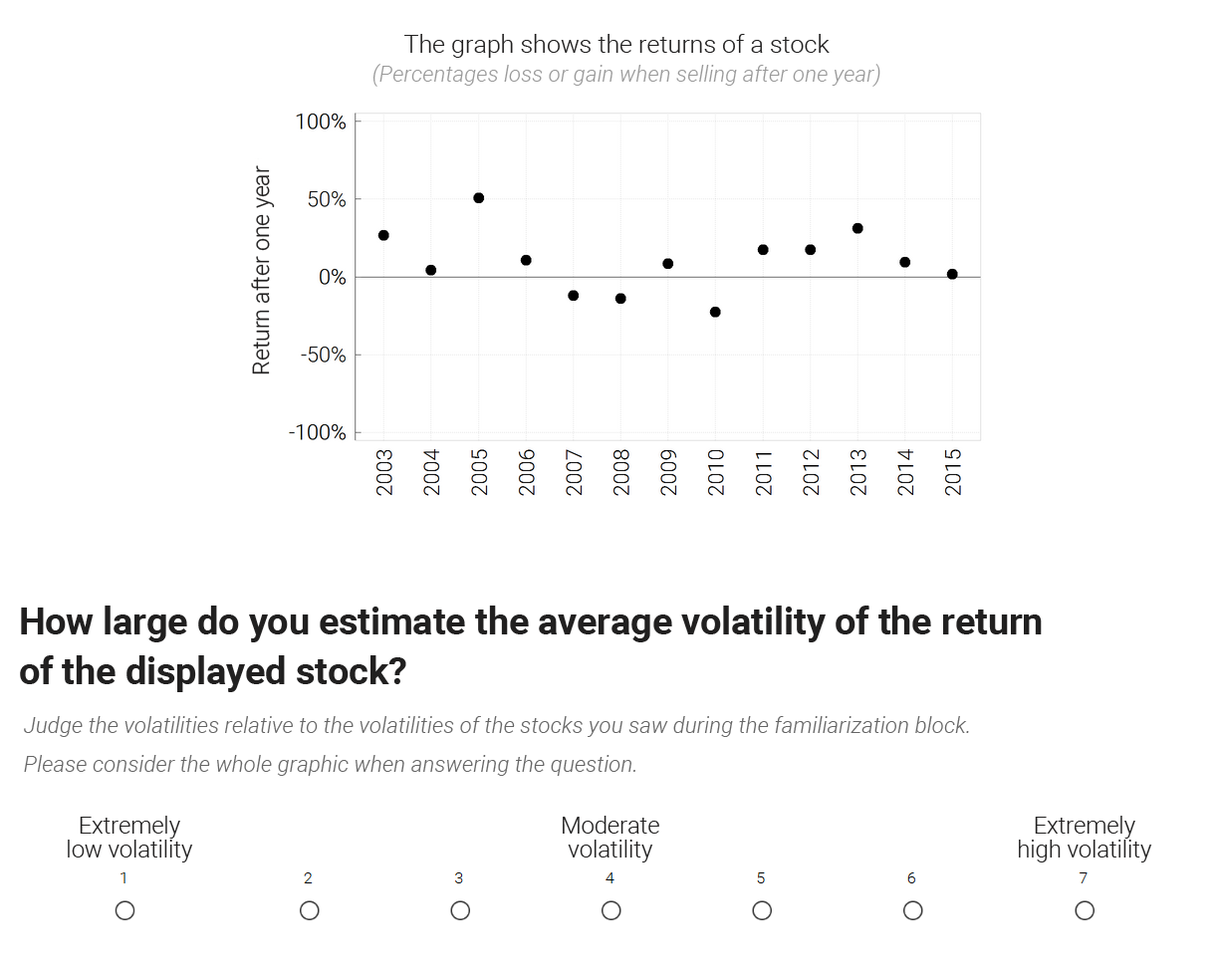
<style>
.page{position:relative;width:1219px;height:979px;background:#ffffff}
.page>*{position:absolute;margin:0}
.t1{font:24.9px "Roboto-Light";color:#212020}
.t2{font:22.2px "Roboto-LightItalic";color:#999999}
.t3{font:22.8px "Roboto-Light";color:#212020}
.t4{font:37.3px/24.9px "Roboto-Bold";color:#212020}
.t5{font:22.2px/16.6px "Roboto-LightItalic";color:#666666}
.t6{font:23.5px/0px "Roboto-Light";color:#212020}
</style>
<div class="page">
<p class="t1" style="left:404px;top:34px;width:425px;height:24px">The graph shows the returns of a stock</p>
<p class="t2" style="left:372px;top:64px;width:508px;height:23px">(Percentages loss or gain when selling after one year)</p>
<p class="t3" style="left:251px;top:165px;width:24px;height:209px;rotate:-90deg">Return after one year</p>
<p class="t4" style="left:20px;top:605px;width:1021px;height:87px">How large do you estimate the average volatility of the return<br>of the displayed stock?</p>
<p class="t5" style="left:24px;top:716px;width:945px;height:60px">Judge the volatilities relative to the volatilities of the stocks you saw during the familiarization block.<br>Please consider the whole graphic when answering the question.</p>
<p class="t6" style="left:68px;top:815px;width:125px;height:47px;text-align:center">Extremely<br>low volatility</p>
<p class="t6" style="left:562px;top:815px;width:97px;height:47px;text-align:center">Moderate<br>volatility</p>
<p class="t6" style="left:1018px;top:815px;width:134px;height:47px;text-align:center">Extremely<br>high volatility</p>
</div>
